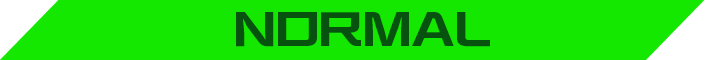
<style>
.page{position:relative;width:706px;height:60px;background:#14e800}
.page>*{position:absolute;margin:0}
.t1{font:38.7px "KafuTechnoStd-U";color:#07520f;scale:1.21 1}
</style>
<div class="page">
<p class="t1" style="left:236px;top:12px;width:254px;height:35px">NORMAL</p>
</div>
